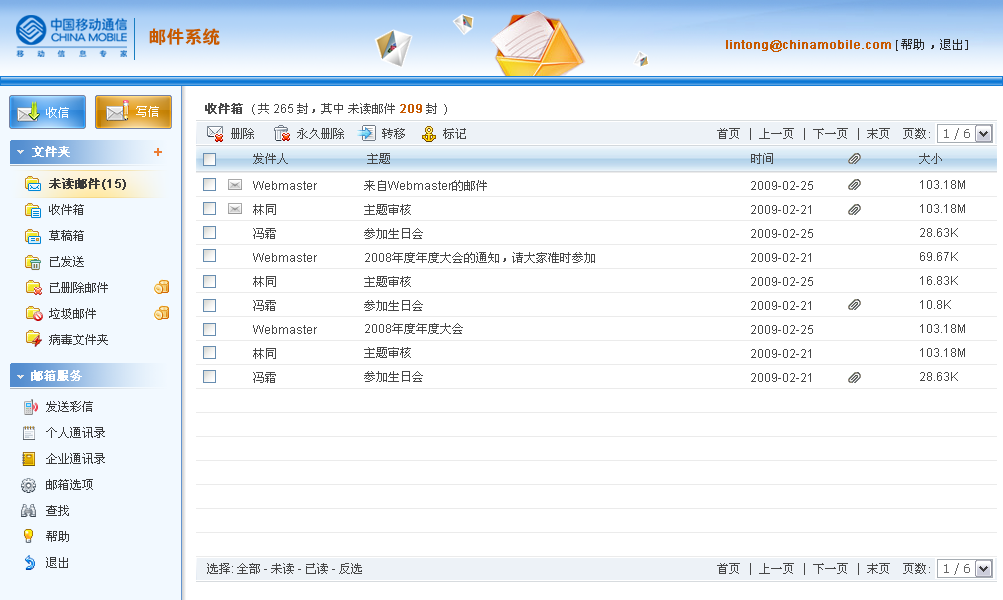
<style>
.page{position:relative;width:1003px;height:600px;background:#ffffff}
.page>*{position:absolute;margin:0}
.t1{font:18px "FZDHTJW--GB1-0";color:#c75900}
.t2{font:12px "ArialMT";color:#c75900;font-weight:bold}
.t3{font:12px "ArialMT";color:#282828}
.t4{font:12px "SimSun";color:#282828}
.t5{font:12px "SimSun";color:#ffffff}
.t6{font:12px "SimSun";color:#474747}
.t7{font:12px "SimSun";color:#474747;font-weight:bold}
.t8{font:12px "ArialMT";color:#474747}
.t9{font:12px "SimSun";color:#ffffff;font-weight:bold}
.t10{font:12px/26px "SimSun";color:#393939}
.t11{font:12px/26px "SimSun";color:#393939;font-weight:bold}
.t12{font:12px/26px "ArialMT";color:#393939;font-weight:bold}
.t13{font:12px/24px "ArialMT";color:#474747}
.t14{font:12px/24px "SimSun";color:#474747}
.t15{font:12px/23.9px "SimSun";color:#474747}
.t16{font:12px/23.9px "ArialMT";color:#474747}
</style>
<div class="page">
<p class="t1" style="left:149px;top:28px;width:71px;height:17px">邮件系统</p>
<p class="t2" style="left:726px;top:39px;width:242px;height:13px">lintong@chinamobile.com <span class="t3">[ </span><span class="t4">帮助 ，退出]</span></p>
<p class="t5" style="left:46px;top:107px;width:23px;height:11px">收信</p>
<p class="t5" style="left:136px;top:106px;width:23px;height:11px">写信</p>
<p class="t6" style="left:205px;top:103px;width:242px;height:12px"><span class="t7">收件箱 </span><span class="t8">( </span>共<span class="t8"> 265 </span>封，其中 未读邮件 <span class="t2">209 </span>封 <span class="t8">)</span></p>
<p class="t6" style="left:231px;top:128px;width:23px;height:11px">删除</p>
<p class="t6" style="left:297px;top:128px;width:47px;height:11px">永久删除</p>
<p class="t6" style="left:382px;top:128px;width:23px;height:11px">转移</p>
<p class="t6" style="left:443px;top:128px;width:23px;height:11px">标记</p>
<p class="t9" style="left:32px;top:146px;width:38px;height:11px">文件夹</p>
<p class="t6" style="left:253px;top:153px;width:689px;height:11px">发件人             主题                                                            时间                        大小</p>
<p class="t10" style="left:49px;top:178px;width:77px;height:167px"><span class="t11">未读邮件</span><span class="t12">(15)<br></span>收件箱<br>草稿箱<br>已发送<br>已删除邮件      <br>垃圾邮件       <br>病毒文件夹</p>
<p class="t13" style="left:253px;top:181px;width:64px;height:202px">Webmaster　   　　<br><span class="t14">林同<br>冯霜</span><br>Webmaster　   　　<br><span class="t14">林同<br>冯霜</span><br>Webmaster　   　　<br><span class="t14">林同<br>冯霜</span></p>
<p class="t15" style="left:364px;top:180px;width:231px;height:202px">来自<span class="t16">Webmaster</span>的邮件<br>主题审核<br>参加生日会<span class="t16"><br>2008</span>年度年度大会的通知，请大家准时参加<br>主题审核<br>参加生日会<span class="t16"><br>2008</span>年度年度大会<br>主题审核<br>参加生日会</p>
<p class="t13" style="left:751px;top:181px;width:62px;height:201px">2009-02-25<br>2009-02-21<br>2009-02-25<br>2009-02-21<br>2009-02-25<br>2009-02-21<br>2009-02-25<br>2009-02-21<br>2009-02-21</p>
<p class="t13" style="left:920px;top:180px;width:45px;height:201px">103.18M<br>103.18M<br>28.63K<br>69.67K<br>16.83K<br>10.8K<br>103.18M<br>103.18M<br>28.63K</p>
<p class="t9" style="left:31px;top:370px;width:51px;height:11px">邮箱服务</p>
<p class="t10" style="left:46px;top:401px;width:59px;height:167px">发送彩信<br>个人通讯录<br>企业通讯录<br>邮箱选项<br>查找<br>帮助<br>退出</p>
<p class="t6" style="left:207px;top:563px;width:155px;height:11px">选择<span class="t8">: </span>全部<span class="t8"> - </span>未读<span class="t8"> - </span>已读<span class="t8"> - </span>反选</p>
</div>
